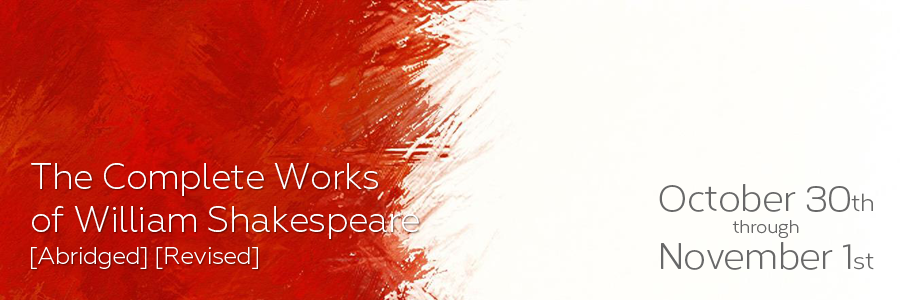
<style>
.page{position:relative;width:900px;height:300px}
.page>*{position:absolute;margin:0}
.t1{font:36px "Geometria-Light";letter-spacing:-0.02em;color:#ffffff}
.t2{font:36px "Corbert-Regular";letter-spacing:-0.02em;color:#686868}
.t3{font:24px "Corbert-Regular";letter-spacing:-0.02em;color:#686868}
.t4{font:18px "Corbert-Regular";letter-spacing:-0.02em;color:#686868}
.t5{font:36px/36px "Corbert-Regular";letter-spacing:-0.02em;color:#686868}
.t6{font:24px/36px "Corbert-Regular";letter-spacing:-0.02em;color:#686868}
.t7{font:24px "Geometria-Light";letter-spacing:-0.02em;color:#ffffff}
</style>
<div class="page">
<p class="t1" style="left:31px;top:163px;width:388px;height:76px">The Complete Works<br>of William Shakespeare</p>
<p class="t2" style="left:659px;top:184px;width:215px;height:86px;text-align:center">October 30<span class="t3">th<br></span><span class="t4">through<br></span><span class="t5">November 1</span><span class="t6">st</span></p>
<p class="t7" style="left:31px;top:247px;width:227px;height:22px">[Abridged] [Revised]</p>
</div>
